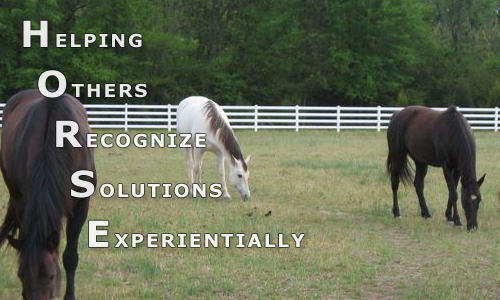
<style>
.page{position:relative;width:500px;height:300px}
.page>*{position:absolute;margin:0}
.t1{font:18px/50px "Verdana-Bold";letter-spacing:0.1em;color:#ffffff;text-transform:uppercase;scale:1.03 1}
.t2{font:36px/50px "Verdana-Bold";letter-spacing:0.1em;color:#ffffff;text-transform:uppercase;scale:1.03 1}
</style>
<div class="page">
<p class="t1" style="left:23px;top:20px;width:282px;height:227px;opacity:0.89"><span class="t2">H</span>elping<br><span class="t2"> O</span>thers<br><span class="t2">  R</span>ecognize<br><span class="t2">   S</span>olutions<br><span class="t2">    E</span>xperientially</p>
</div>
